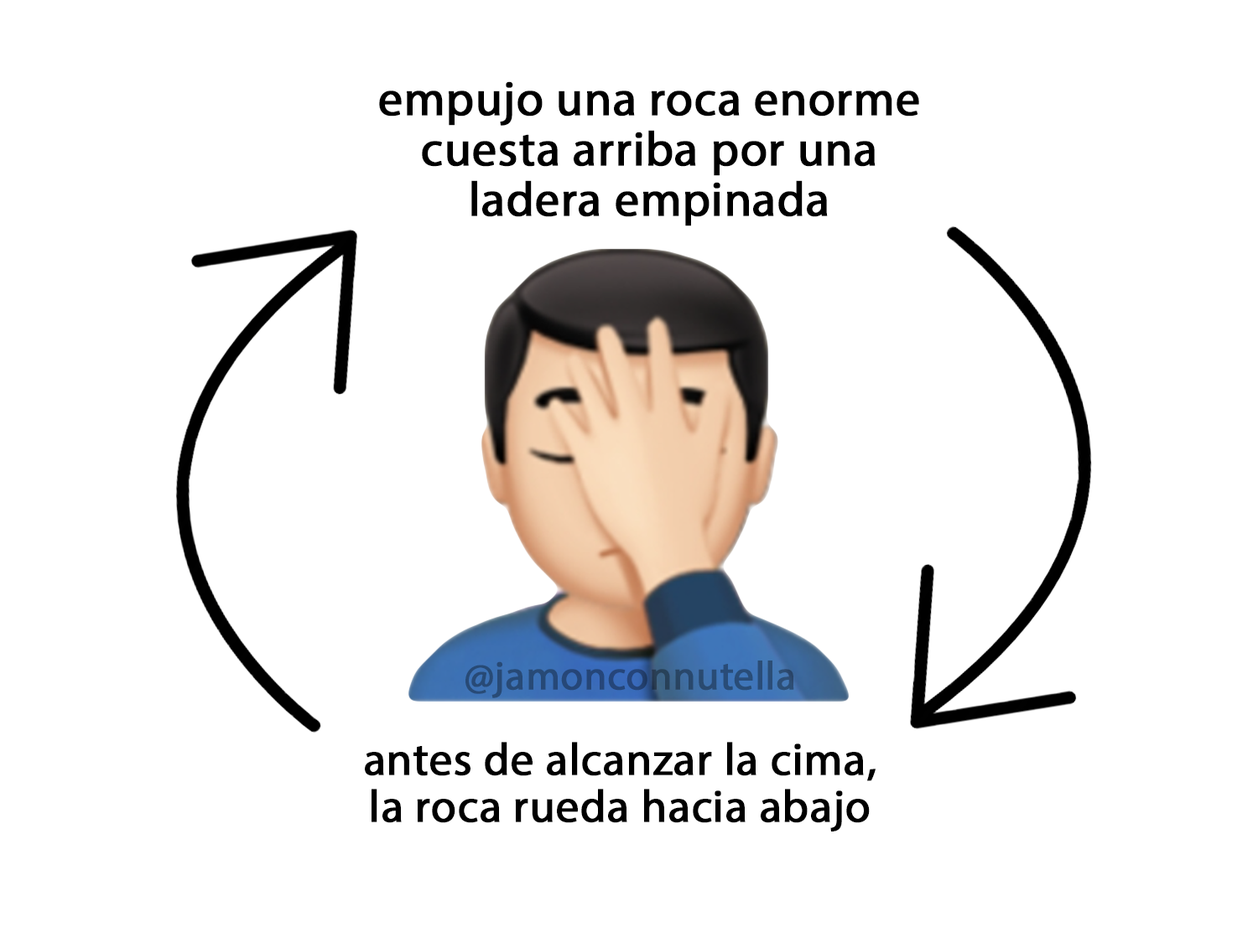
<style>
.page{position:relative;width:1258px;height:948px;background:#ffffff}
.page>*{position:absolute;margin:0}
.t1{font:48.8px "MyriadPro-Regular";color:#000000;font-weight:bold}
.t2{font:40.2px "MyriadPro-Regular";color:#284a76;font-weight:bold}
.t3{font:45.7px "MyriadPro-Regular";color:#000000;font-weight:bold}
</style>
<div class="page">
<p class="t1" style="left:379px;top:81px;width:540px;height:145px;text-align:center">empujo una roca enorme<br>cuesta arriba por una<br>ladera empinada</p>
<p class="t2" style="left:465px;top:661px;width:329px;height:37px">@jamonconnutella</p>
<p class="t3" style="left:365px;top:742px;width:510px;height:90px;text-align:center">antes de alcanzar la cima,<br>la roca rueda hacia abajo</p>
</div>
